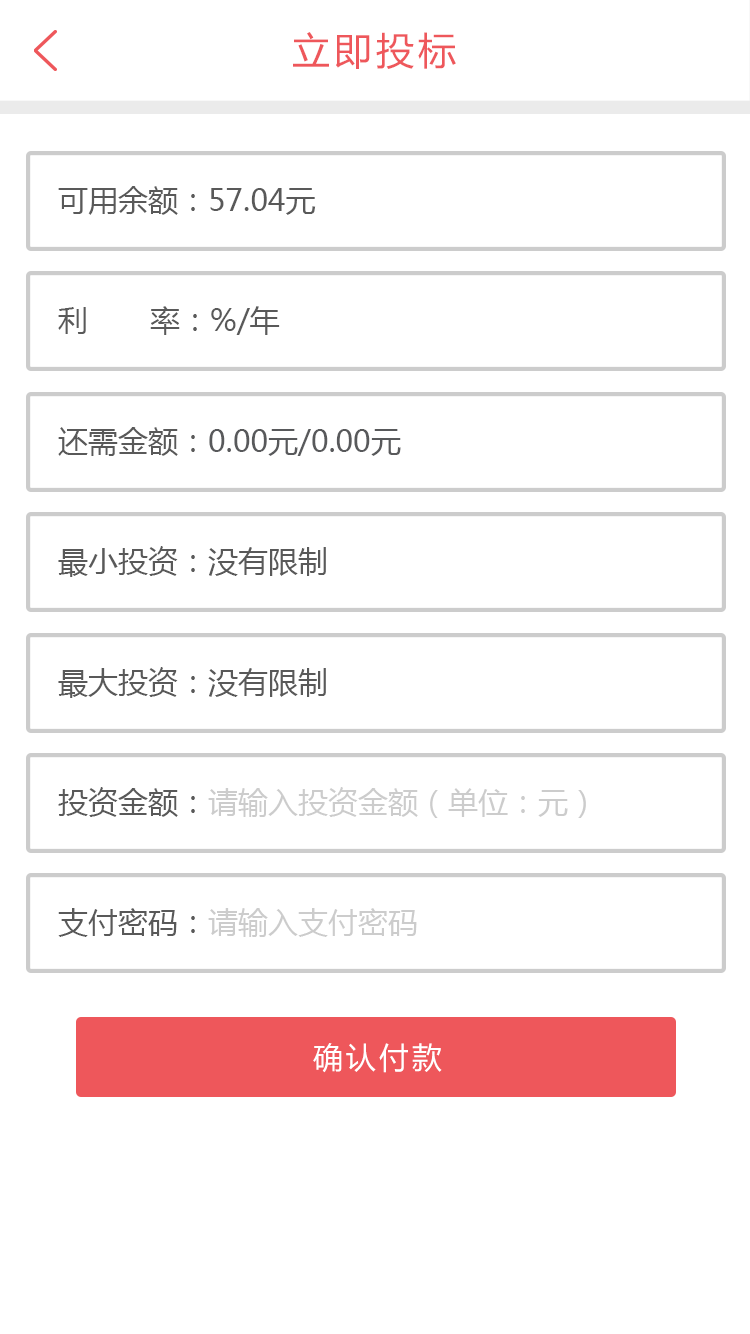
<style>
.page{position:relative;width:750px;height:1334px;background:#ffffff}
.page>*{position:absolute;margin:0}
.t1{font:38px "MicrosoftYaHei";letter-spacing:0.1em;color:#ee575b}
.t2{font:30px "MicrosoftYaHei";color:#595959}
.t3{font:30px "MicrosoftYaHei";color:#58595b}
.t4{font:30px "MicrosoftYaHei";color:#cccccc}
.t5{font:30px "MicrosoftYaHei";letter-spacing:0.1em;color:#ffffff}
</style>
<div class="page">
<p class="t1" style="left:293px;top:32px;width:163px;height:37px">立即投标</p>
<p class="t2" style="left:58px;top:186px;width:258px;height:29px">可用余额：57.04元</p>
<p class="t2" style="left:58px;top:306px;width:222px;height:29px">利       率：%/年</p>
<p class="t3" style="left:58px;top:427px;width:343px;height:29px"><span class="t2">还需金额：</span>0.00元/0.00元</p>
<p class="t2" style="left:58px;top:546px;width:268px;height:31px">最小投资：没有限制</p>
<p class="t2" style="left:58px;top:667px;width:268px;height:31px">最大投资：没有限制</p>
<p class="t4" style="left:58px;top:787px;width:528px;height:31px"><span class="t2">投资金额：</span>请输入投资金额（单位：元）</p>
<p class="t4" style="left:58px;top:908px;width:359px;height:29px"><span class="t2">支付密码：</span>请输入支付密码</p>
<p class="t5" style="left:313px;top:1043px;width:129px;height:30px">确认付款</p>
</div>
